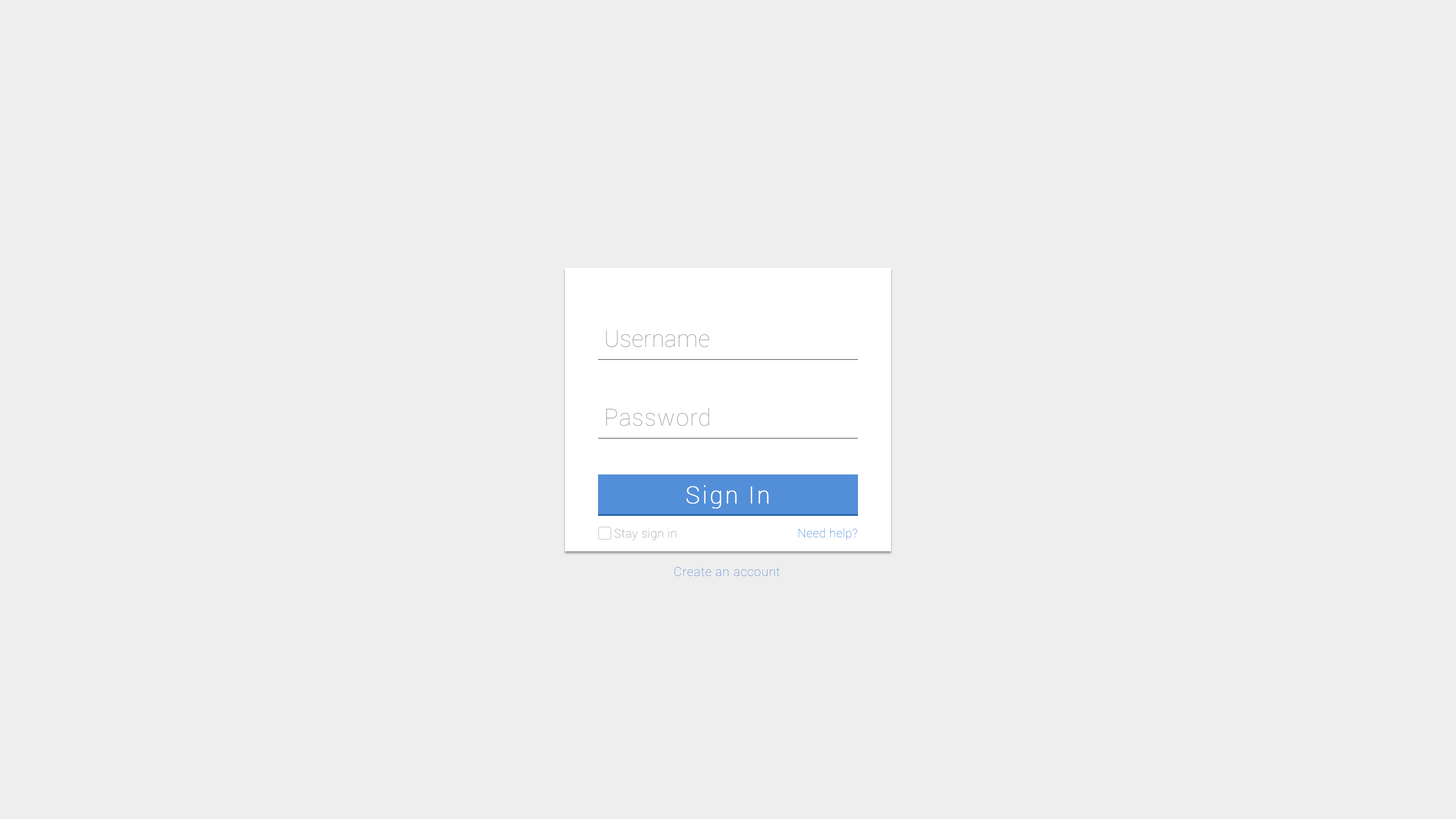
<style>
.page{position:relative;width:1456px;height:819px;background:#eeeeee}
.page>*{position:absolute;margin:0}
.t1{font:23.6px "Roboto-Thin";color:#a4a5a5}
.t2{font:23.6px "Roboto-Thin";letter-spacing:0.035em;color:#a4a5a5}
.t3{font:23.6px "Roboto-Thin";letter-spacing:0.075em;color:#fcfdfe;font-weight:bold}
.t4{font:11.8px "Roboto-Thin";letter-spacing:0.035em;color:#a4a5a5}
.t5{font:11.8px "Roboto-Thin";letter-spacing:0.035em;color:#538ed9}
.t6{font:12.6px "Roboto-Thin";letter-spacing:0.035em;color:#538ed9}
</style>
<div class="page">
<p class="t1" style="left:606px;top:330px;width:103px;height:17px">Username</p>
<p class="t2" style="left:606px;top:408px;width:103px;height:18px">Password</p>
<p class="t3" style="left:686px;top:485px;width:83px;height:24px">Sign In</p>
<p class="t4" style="left:614px;top:528px;width:62px;height:12px">Stay sign in</p>
<p class="t5" style="left:798px;top:528px;width:59px;height:12px">Need help?</p>
<p class="t6" style="left:674px;top:567px;width:106px;height:9px">Create an account</p>
</div>
